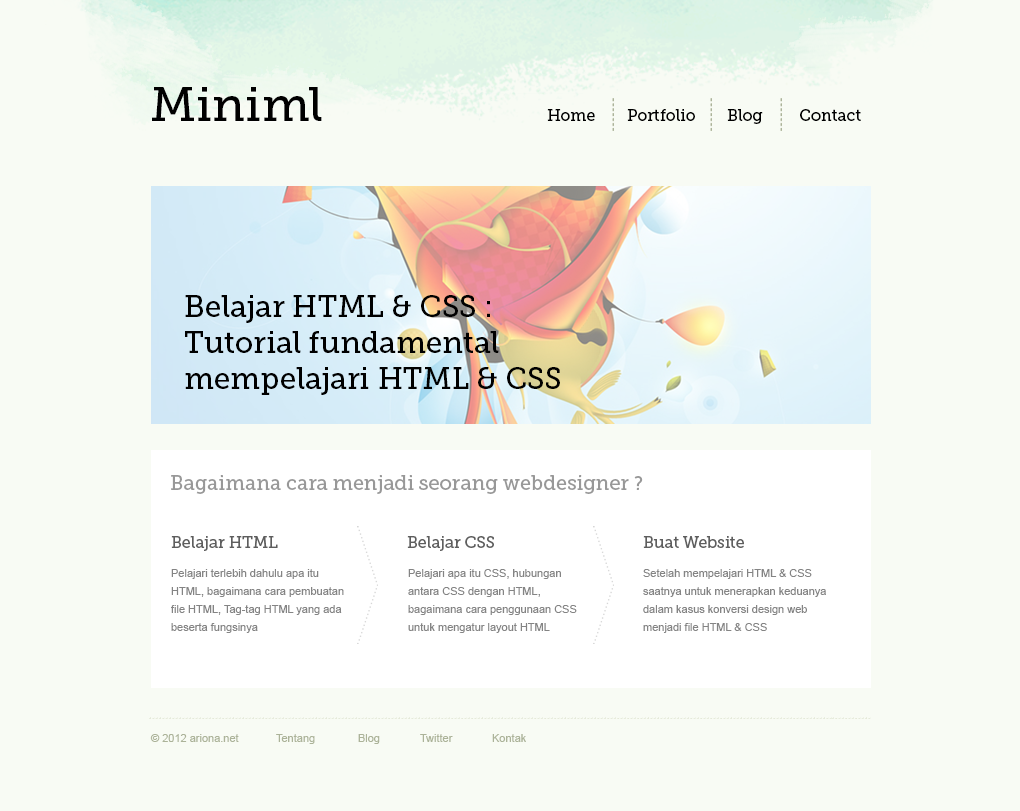
<style>
.page{position:relative;width:1020px;height:811px;background:#f8fbf4}
.page>*{position:absolute;margin:0}
.t1{font:48.1px "MuseoSlab-500";color:#000000}
.t2{font:16px "MuseoSlab-500";color:#000000}
.t3{font:30px "MuseoSlab-500";color:#000000}
.t4{font:20px "MuseoSlab-500";color:#989898}
.t5{font:16px "MuseoSlab-500";color:#5e5e5e}
.t6{font:11px/18px "ArialMT";color:#848484}
.t7{font:11px "ArialMT";color:#acb399}
</style>
<div class="page">
<p class="t1" style="left:152px;top:87px;width:170px;height:34px">Miniml</p>
<p class="t2" style="left:547px;top:109px;width:314px;height:15px">Home   Portfolio Blog  Contact</p>
<p class="t3" style="left:185px;top:295px;width:375px;height:100px">Belajar HTML &amp; CSS : <br>Tutorial fundamental <br>mempelajari HTML &amp; CSS</p>
<p class="t4" style="left:171px;top:475px;width:472px;height:19px">Bagaimana cara menjadi seorang webdesigner ?</p>
<p class="t5" style="left:171px;top:536px;width:107px;height:15px">Belajar HTML</p>
<p class="t5" style="left:407px;top:536px;width:87px;height:15px">Belajar CSS</p>
<p class="t5" style="left:643px;top:536px;width:101px;height:12px">Buat Website</p>
<p class="t6" style="left:171px;top:569px;width:173px;height:64px">Pelajari terlebih dahulu apa itu HTML, bagaimana cara pembuatan file HTML, Tag-tag HTML yang ada beserta fungsinya</p>
<p class="t6" style="left:408px;top:569px;width:169px;height:64px">Pelajari apa itu CSS, hubungan antara CSS dengan HTML, bagaimana cara penggunaan CSS untuk mengatur layout HTML</p>
<p class="t6" style="left:643px;top:569px;width:183px;height:64px">Setelah mempelajari HTML &amp; CSS saatnya untuk menerapkan keduanya dalam kasus konversi design web menjadi file HTML &amp; CSS</p>
<p class="t7" style="left:150px;top:734px;width:89px;height:8px">© 2012 ariona.net</p>
<p class="t7" style="left:276px;top:734px;width:250px;height:10px">Tentang              Blog  Twitter  Kontak</p>
</div>
